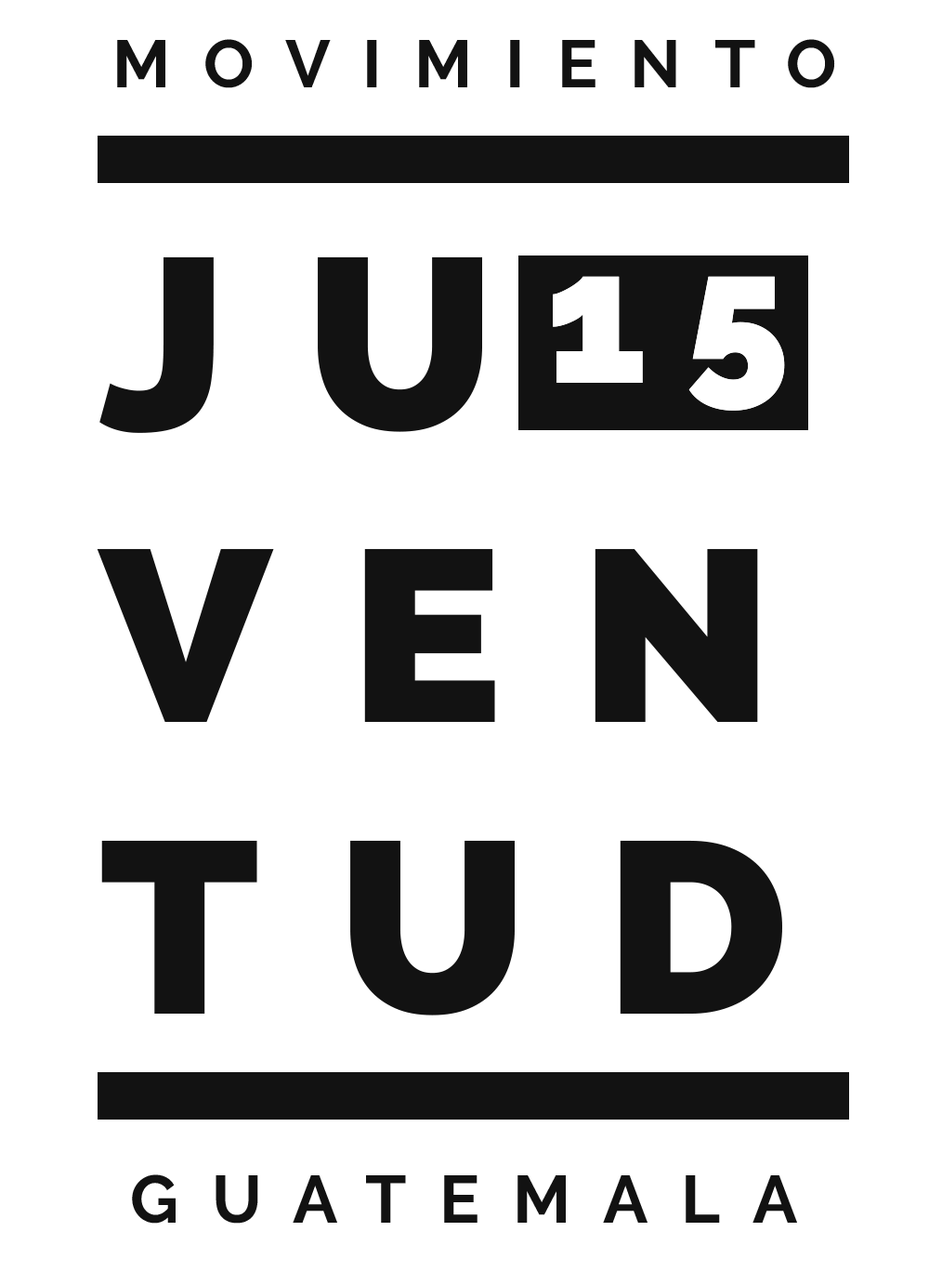
<style>
.page{position:relative;width:929px;height:1284px;background:#ffffff}
.page>*{position:absolute;margin:0}
.t1{font:66.9px "Raleway-Bold";letter-spacing:0.49em;color:#121212}
.t2{font:243.1px "Raleway-Black";letter-spacing:0.3em;color:#121212;scale:1.06 1}
</style>
<div class="page">
<p class="t1" style="left:117px;top:39px;width:718px;height:49px">MOVIMIENTO</p>
<p class="t2" style="left:97px;top:256px;width:685px;height:759px">JU<br>VEN<br>TUD</p>
<p class="t1" style="left:132px;top:1174px;width:665px;height:49px">GUATEMALA</p>
</div>
